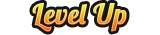
<style>
.page{position:relative;width:160px;height:35px;background:#ffffff}
.page>*{position:absolute;margin:0}
.t1{font:28px "Lobster1.4";font-weight:bold}
</style>
<div class="page">
<p class="t1" style="left:0px;top:4px;width:160px;height:31px">Level Up</p>
</div>
